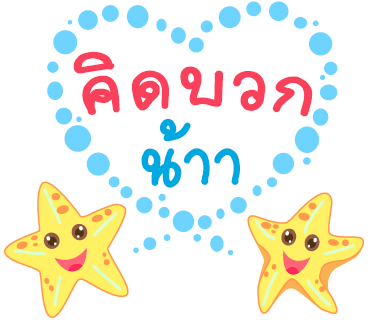
<style>
.page{position:relative;width:370px;height:320px;background:#ffffff}
.page>*{position:absolute;margin:0}
.t1{font:107px "2005_iannnnnMTV";letter-spacing:0.025em;color:#fa405a;scale:1.06 1}
.t2{font:107px "2005_iannnnnMTV";color:#00a8e1}
</style>
<div class="page">
<p class="t1" style="left:73px;top:51px;width:240px;height:66px">คิดบวก</p>
<p class="t2" style="left:141px;top:118px;width:99px;height:70px">น้าา</p>
</div>
